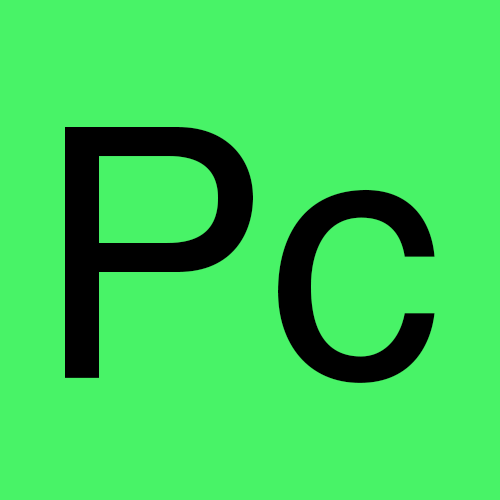
<style>
.page{position:relative;width:500px;height:500px;background:#48f367}
.page>*{position:absolute;margin:0}
.t1{font:350px "Helvetica";color:#000000}
</style>
<div class="page">
<p class="t1" style="left:65px;top:127px;width:370px;height:256px">Pc</p>
</div>
